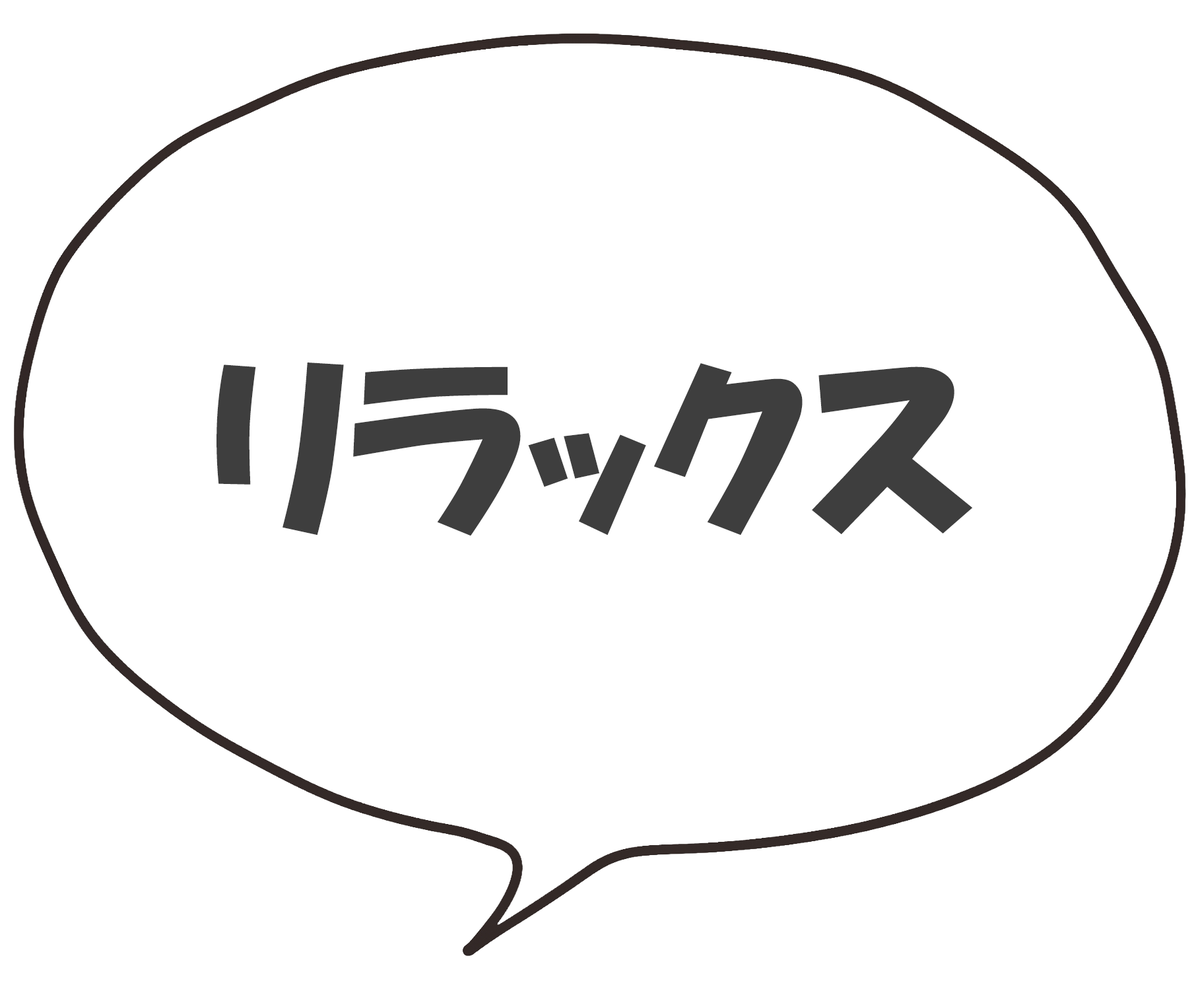
<style>
.page{position:relative;width:1196px;height:997px;background:#ffffff}
.page>*{position:absolute;margin:0}
.t1{font:192.5px "HGPSoeiKakupoptai";color:#3e3e3e}
</style>
<div class="page">
<p class="t1" style="left:217px;top:362px;width:756px;height:174px">リラックス</p>
</div>
